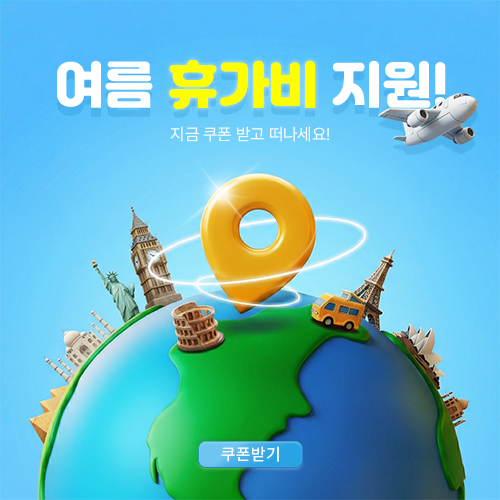
<style>
.page{position:relative;width:500px;height:500px}
.page>*{position:absolute;margin:0}
.t1{font:50px "Jalnan2TTF";color:#ffff00;text-transform:uppercase}
.t2{font:50px "Jalnan2TTF";color:#ffffff;text-transform:uppercase}
.t3{font:16.7px "Pretendard-Light";color:#ffffff}
.t4{font:16.7px "Pretendard-Medium";letter-spacing:0.025em;color:#ffffff}
</style>
<div class="page">
<p class="t1" style="left:57px;top:60px;width:389px;height:49px"><span class="t2">여름 </span>휴가비 <span class="t2">지원!</span></p>
<p class="t1" style="left:169px;top:60px;width:146px;height:49px">휴가비</p>
<p class="t3" style="left:170px;top:126px;width:159px;height:16px">지금 쿠폰 받고 떠나세요!</p>
<p class="t4" style="left:221px;top:446px;width:58px;height:16px">쿠폰받기</p>
</div>
